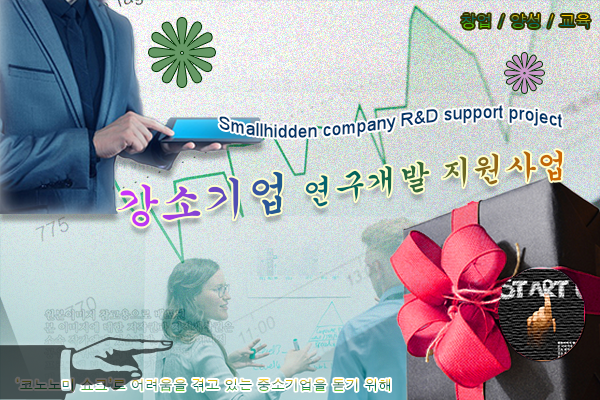
<style>
.page{position:relative;width:600px;height:400px}
.page>*{position:absolute;margin:0}
.t1{font:18px "ArialMT";color:#003366}
.t2{font:32px "Gungsuh"}
.t3{font:44px "Gungsuh"}
.t4{font:14px "Dotum"}
</style>
<div class="page">
<p class="t1" style="left:219px;top:105px;width:343px;height:33px">Smallhidden company R&amp;D support project</p>
<p class="t2" style="left:117px;top:150px;width:446px;height:77px"><span class="t3">강소기업</span> 연구개발 지원사업</p>
<p class="t4" style="left:16px;top:378px;width:375px;height:14px">‘코노노미 쇼크’로 어려움을 겪고 있는 중소기업을 돋기 위해</p>
</div>
